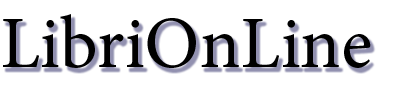
<style>
.page{position:relative;width:400px;height:85px;background:#ffffff}
.page>*{position:absolute;margin:0}
.t1{font:74.1px "MinionPro-Regular";color:#000000}
</style>
<div class="page">
<p class="t1" style="left:3px;top:14px;width:368px;height:54px">LibriOnLine</p>
</div>
